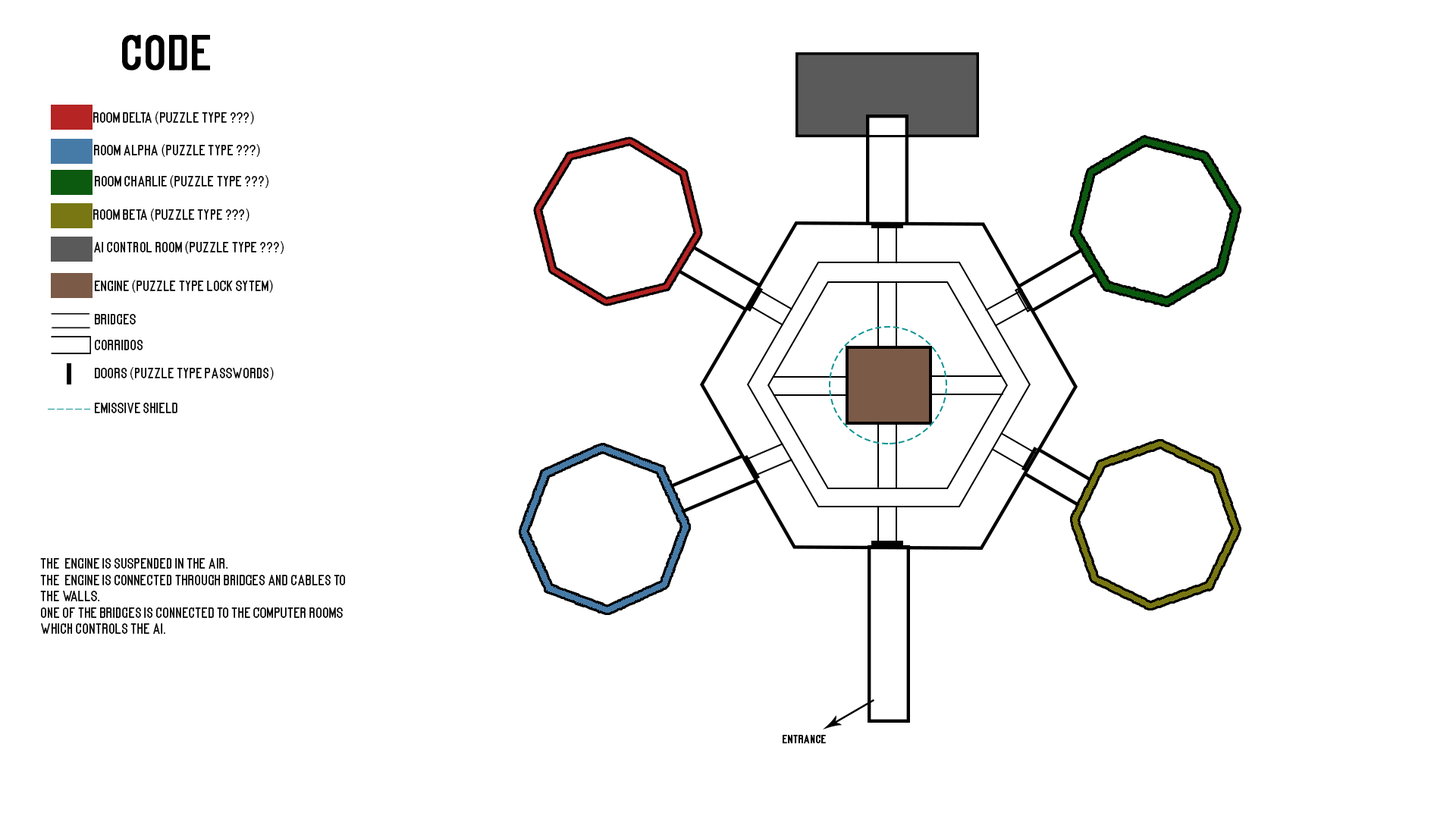
<style>
.page{position:relative;width:1456px;height:819px;background:#ffffff}
.page>*{position:absolute;margin:0}
.t1{font:45.5px "Kanalisirung";color:#000000;font-weight:bold}
.t2{font:13.6px "Kanalisirung";color:#000000}
.t3{font:10.6px "Kanalisirung";color:#000000;font-weight:bold}
</style>
<div class="page">
<p class="t1" style="left:122px;top:35px;width:88px;height:36px">Code</p>
<p class="t2" style="left:93px;top:111px;width:161px;height:13px">Room Delta (puzzle Type ???)</p>
<p class="t2" style="left:94px;top:144px;width:166px;height:13px">Room Alpha (puzzle Type ???)</p>
<p class="t2" style="left:95px;top:175px;width:173px;height:13px">Room Charlie (puzzle Type ???)</p>
<p class="t2" style="left:93px;top:209px;width:156px;height:12px">Room Beta (puzzle Type ???)</p>
<p class="t2" style="left:94px;top:241px;width:190px;height:13px">AI control Room (puzzle Type ???)</p>
<p class="t2" style="left:95px;top:280px;width:178px;height:13px">Engine (puzzle Type Lock sytem)</p>
<p class="t2" style="left:95px;top:314px;width:41px;height:11px">Bridges</p>
<p class="t2" style="left:95px;top:340px;width:48px;height:10px">Corridos</p>
<p class="t2" style="left:95px;top:367px;width:179px;height:13px">Doors (puzzle Type Passwords)</p>
<p class="t2" style="left:95px;top:403px;width:82px;height:10px">Emissive shield</p>
<p class="t2" style="left:40px;top:558px;width:305px;height:76px">The engine is suspended in the air.<br>The engine is connected through bridges and cables to the walls.<br>One of the bridges is connected to the computer rooms which controls the AI.</p>
<p class="t3" style="left:783px;top:735px;width:43px;height:9px">EntRANCE</p>
</div>
